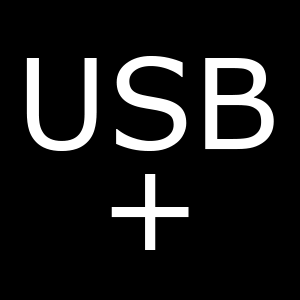
<style>
.page{position:relative;width:300px;height:300px;background:#000000}
.page>*{position:absolute;margin:0}
.t1{font:125px "Verdana";color:#ffffff}
</style>
<div class="page">
<p class="t1" style="left:26px;top:56px;width:248px;height:95px">USB</p>
<p class="t1" style="left:111px;top:174px;width:78px;height:76px">+</p>
</div>
